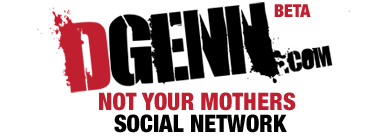
<style>
.page{position:relative;width:390px;height:138px;background:#ffffff}
.page>*{position:absolute;margin:0}
.t1{font:18px "HelveticaNeue-BlackCond";color:#bf1f2e}
.t2{font:24px/22px "HelveticaNeue-BlackCond";color:#bf1f2e}
.t3{font:24px/22px "HelveticaNeue-BlackCond";color:#000000}
</style>
<div class="page">
<p class="t1" style="left:274px;top:4px;width:37px;height:13px">BETA</p>
<p class="t2" style="left:99px;top:92px;width:197px;height:41px;text-align:center">NOT YOUR MOTHERS <br><span class="t3">SOCIAL NETWORK</span></p>
</div>
